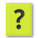
<style>
.page{position:relative;width:38px;height:38px;background:#d4e838}
.page>*{position:absolute;margin:0}
.t1{font:28px "MetaBold";color:#444444}
</style>
<div class="page">
<p class="t1" style="left:14px;top:9px;width:11px;height:21px">?</p>
</div>
